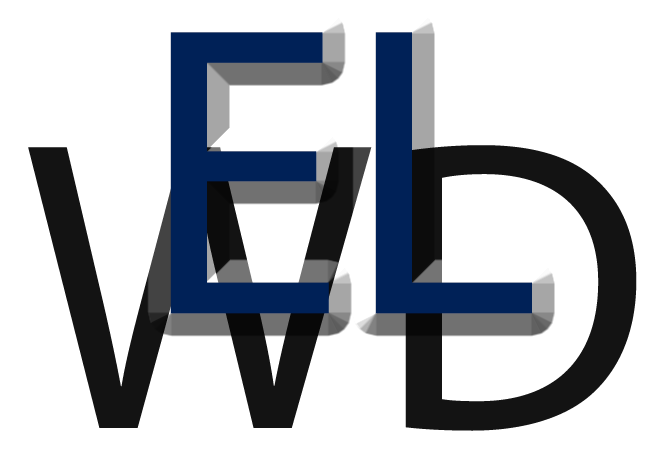
<style>
.page{position:relative;width:652px;height:465px;background:#ffffff}
.page>*{position:absolute;margin:0}
.t1{font:416.7px "MyriadPro-Regular";color:#002157}
.t2{font:416.7px "MyriadPro-Regular";color:#131313}
</style>
<div class="page">
<p class="t1" style="left:170px;top:32px;width:362px;height:282px">EL</p>
<p class="t2" style="left:28px;top:145px;width:609px;height:286px">WD</p>
</div>
